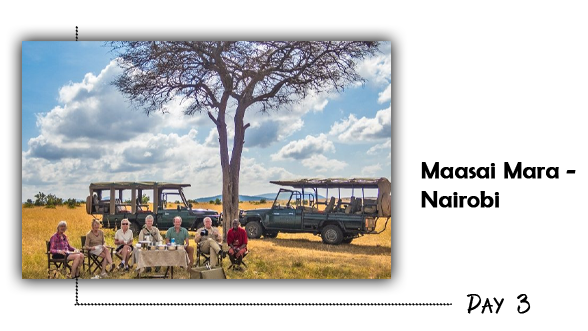
<style>
.page{position:relative;width:588px;height:331px;background:#ffffff}
.page>*{position:absolute;margin:0}
.t1{font:24.2px "BerlinSansFB-Reg";color:#000000;font-weight:bold}
.t2{font:24.2px "AlphaThin";color:#000000;font-weight:bold}
</style>
<div class="page">
<p class="t1" style="left:421px;top:162px;width:155px;height:46px">Maasai Mara - <br>Nairobi</p>
<p class="t2" style="left:466px;top:294px;width:65px;height:20px">Day 3</p>
</div>
